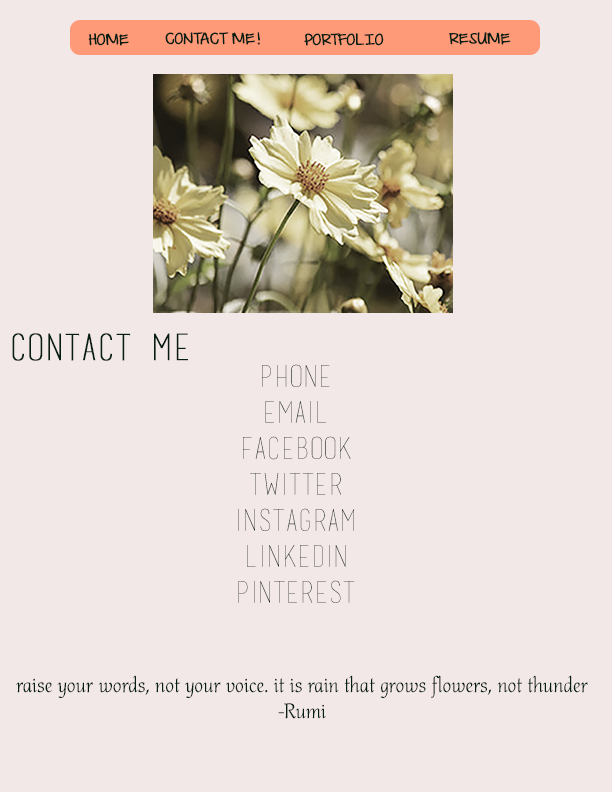
<style>
.page{position:relative;width:612px;height:792px;background:#f3e8e8}
.page>*{position:absolute;margin:0}
.t1{font:14px "DJBILoveMeSomeAly";color:#051e12;text-transform:uppercase;font-weight:bold}
.t2{font:36px "basictitlefont";color:#051e12;text-transform:uppercase;font-weight:bold}
.t3{font:30px "basictitlefont";color:#051e12;text-transform:uppercase}
.t4{font:22px "Althea-Regular";color:#051e12}
</style>
<div class="page">
<p class="t1" style="left:88px;top:33px;width:41px;height:13px">home</p>
<p class="t1" style="left:165px;top:32px;width:95px;height:13px">contact me!</p>
<p class="t1" style="left:304px;top:33px;width:80px;height:13px">portfolio</p>
<p class="t1" style="left:449px;top:32px;width:62px;height:13px">resume</p>
<p class="t2" style="left:12px;top:333px;width:176px;height:28px">contact me</p>
<p class="t3" style="left:238px;top:364px;width:117px;height:239px;text-align:center">phone<br>email<br>facebook<br>twitter<br>instagram<br>Linkedin<br>pinterest</p>
<p class="t4" style="left:16px;top:675px;width:572px;height:44px;text-align:center">raise your words, not your voice. it is rain that grows flowers, not thunder<br>-Rumi</p>
</div>
